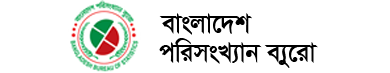
<style>
.page{position:relative;width:390px;height:73px;background:#ffffff}
.page>*{position:absolute;margin:0}
.t1{font:30px "SutonnyMJBold";color:#000000}
</style>
<div class="page">
<p class="t1" style="left:159px;top:13px;width:93px;height:22px">evsjv‡`k</p>
<p class="t1" style="left:159px;top:38px;width:159px;height:30px">cwimsL¨vb e¨y‡iv</p>
</div>
